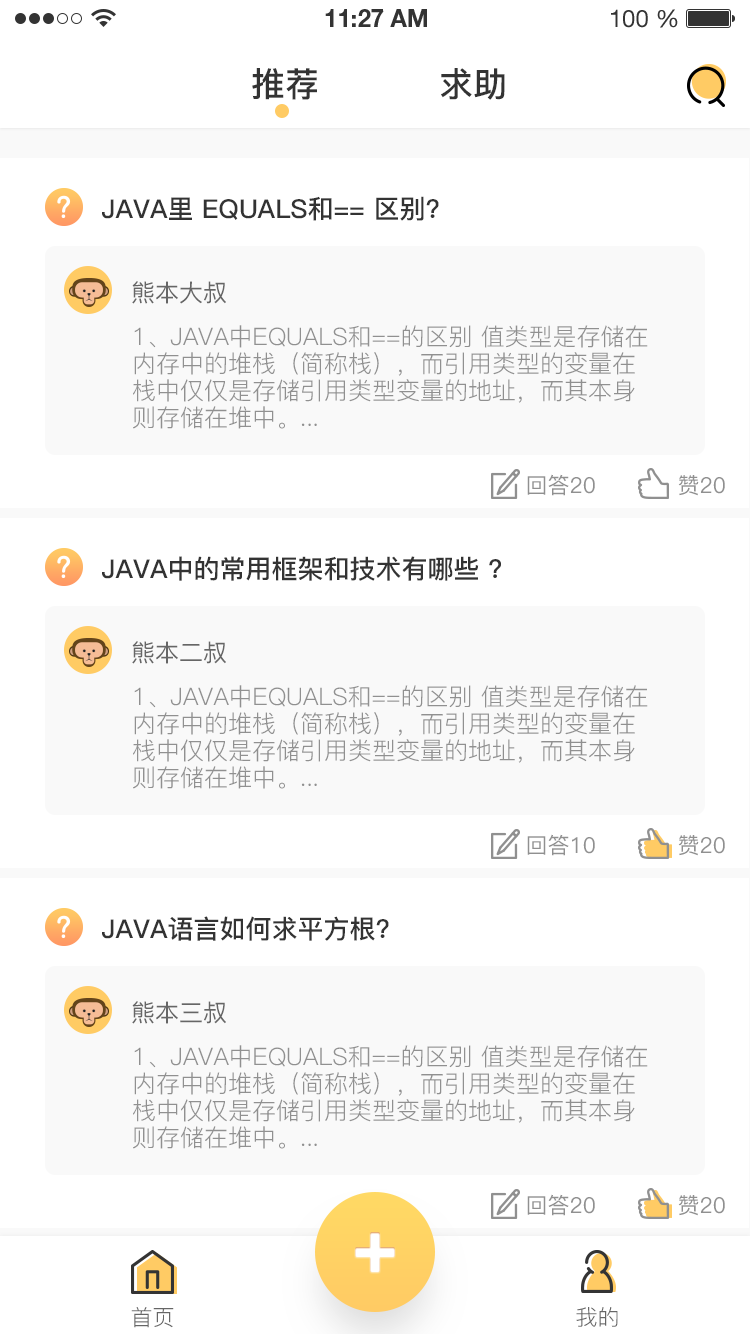
<style>
.page{position:relative;width:750px;height:1334px;background:#ffffff}
.page>*{position:absolute;margin:0}
.t1{font:34px "PingFang-SC-Bold";color:#333333;text-transform:uppercase}
.t2{font:26px "PingFang-SC-Bold";color:#333333;text-transform:uppercase}
.t3{font:24px "PingFang-SC-Medium";color:#666666;text-transform:uppercase}
.t4{font:24px/27px "PingFang-SC-Regular";color:#909090;text-transform:uppercase}
.t5{font:22px "PingFang-SC-Medium";color:#909090;text-transform:uppercase}
.t6{font:22px "PingFang-SC-Regular";color:#666666;text-transform:uppercase}
</style>
<div class="page">
<p class="t1" style="left:252px;top:68px;width:65px;height:32px">推荐</p>
<p class="t1" style="left:441px;top:68px;width:64px;height:32px">求助</p>
<p class="t2" style="left:102px;top:196px;width:337px;height:25px">java里 equals和== 区别?</p>
<p class="t3" style="left:132px;top:281px;width:94px;height:23px">熊本大叔</p>
<p class="t4" style="left:133px;top:325px;width:515px;height:104px">1、java中equals和==的区别 值类型是存储在内存中的堆栈（简称栈），而引用类型的变量在栈中仅仅是存储引用类型变量的地址，而其本身则存储在堆中。...</p>
<p class="t5" style="left:527px;top:474px;width:68px;height:22px">回答20</p>
<p class="t5" style="left:678px;top:475px;width:47px;height:21px">赞20</p>
<p class="t2" style="left:102px;top:556px;width:399px;height:25px">Java中的常用框架和技术有哪些 ?</p>
<p class="t3" style="left:132px;top:641px;width:94px;height:23px">熊本二叔</p>
<p class="t4" style="left:133px;top:685px;width:515px;height:104px">1、java中equals和==的区别 值类型是存储在内存中的堆栈（简称栈），而引用类型的变量在栈中仅仅是存储引用类型变量的地址，而其本身则存储在堆中。...</p>
<p class="t5" style="left:527px;top:834px;width:68px;height:22px">回答10</p>
<p class="t5" style="left:678px;top:835px;width:47px;height:21px">赞20</p>
<p class="t2" style="left:102px;top:916px;width:287px;height:25px">java语言如何求平方根?</p>
<p class="t3" style="left:132px;top:1001px;width:94px;height:23px">熊本三叔</p>
<p class="t4" style="left:133px;top:1045px;width:515px;height:104px">1、java中equals和==的区别 值类型是存储在内存中的堆栈（简称栈），而引用类型的变量在栈中仅仅是存储引用类型变量的地址，而其本身则存储在堆中。...</p>
<p class="t5" style="left:527px;top:1194px;width:68px;height:22px">回答20</p>
<p class="t5" style="left:678px;top:1195px;width:47px;height:21px">赞20</p>
<p class="t6" style="left:131px;top:1307px;width:43px;height:21px">首页</p>
<p class="t6" style="left:576px;top:1307px;width:42px;height:20px">我的</p>
</div>
